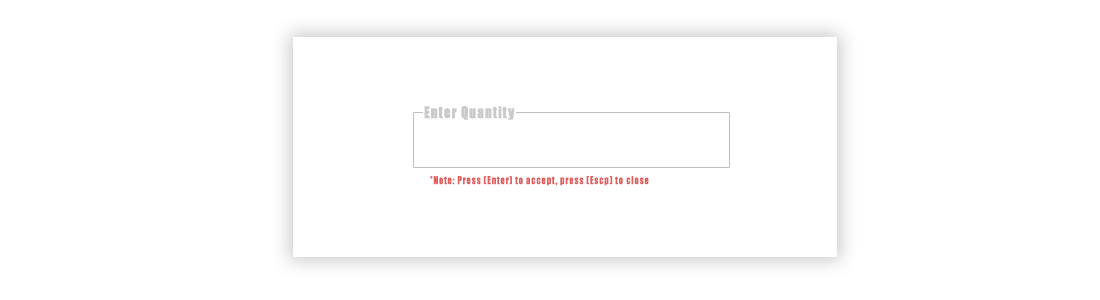
<style>
.page{position:relative;width:1100px;height:300px;background:#ffffff}
.page>*{position:absolute;margin:0}
.t1{font:15px "Impact";letter-spacing:0.05em;color:#cacaca;font-weight:bold;scale:0.89 1}
.t2{font:10px "Impact";letter-spacing:0.05em;color:#e15e5e;font-weight:bold;scale:0.89 1}
</style>
<div class="page">
<p class="t1" style="left:424px;top:106px;width:91px;height:14px">Enter Quantity</p>
<p class="t2" style="left:430px;top:176px;width:219px;height:10px">*Note: Press (Enter) to accept, press (Escp) to close</p>
</div>
